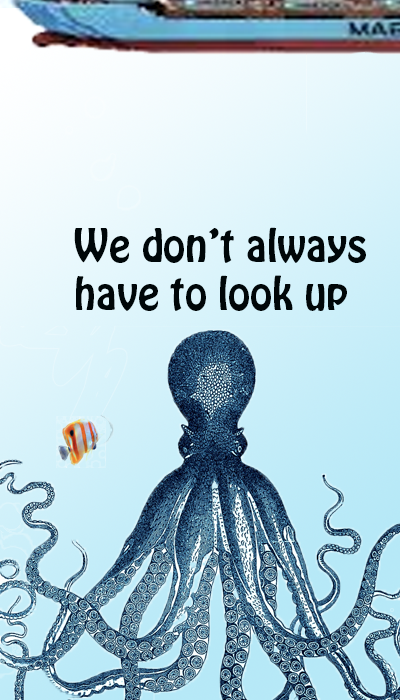
<style>
.page{position:relative;width:400px;height:700px}
.page>*{position:absolute;margin:0}
.t1{font:40px "HoboStd";color:#000709}
</style>
<div class="page">
<p class="t1" style="left:74px;top:227px;width:292px;height:84px">We don’t always <br>have to look up</p>
</div>
